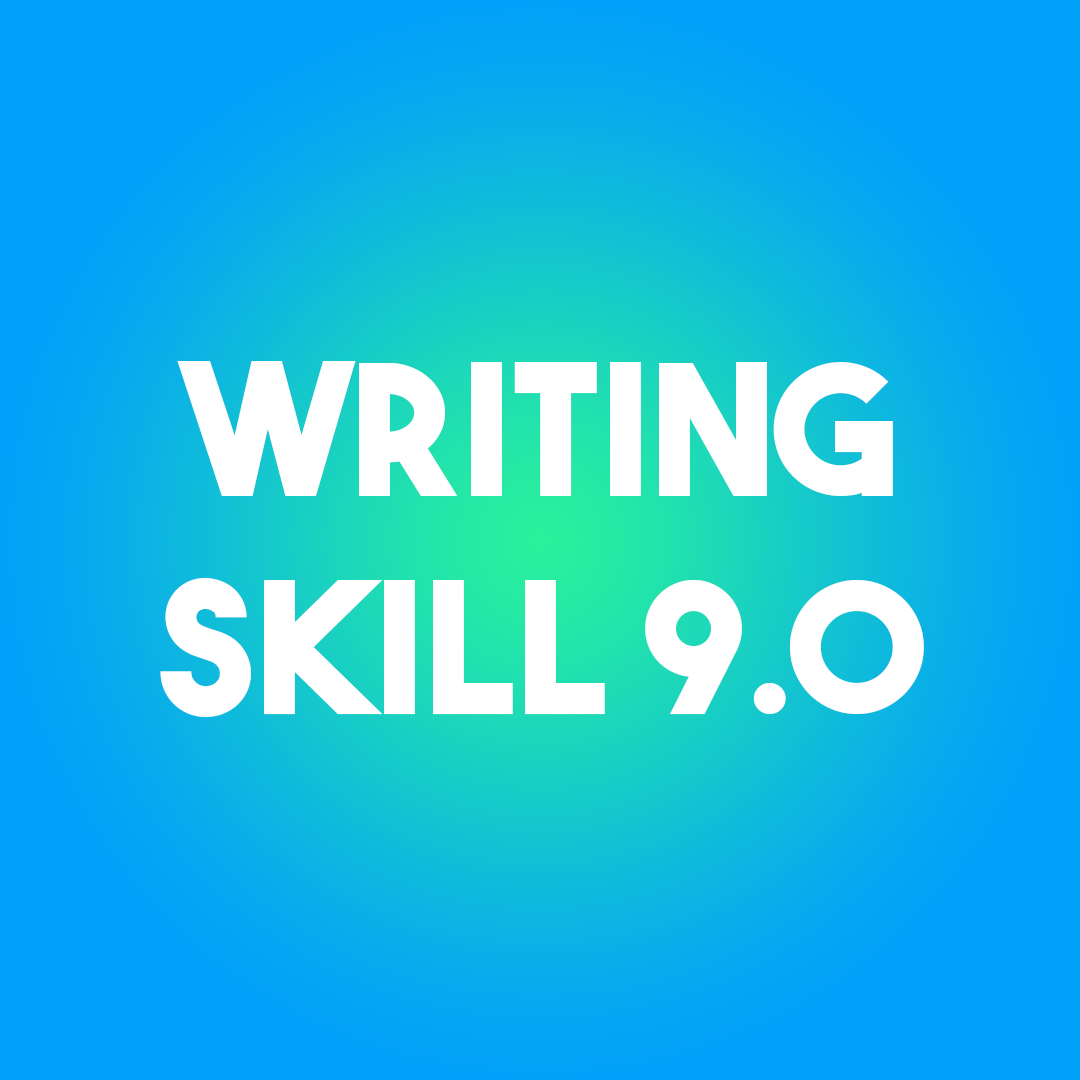
<style>
.page{position:relative;width:1080px;height:1080px;background:#02a1f9}
.page>*{position:absolute;margin:0}
.t1{font:182.3px "TheBoldFont";color:#ffffff;text-transform:uppercase}
</style>
<div class="page">
<p class="t1" style="left:160px;top:361px;width:764px;height:356px;text-align:center">wRITING<br>Skill 9.0</p>
</div>
